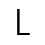
<style>
.page{position:relative;width:45px;height:45px;background:#ffffff}
.page>*{position:absolute;margin:0}
.t1{font:36px "CenturyGothic";color:#000000}
</style>
<div class="page">
<p class="t1" style="left:17px;top:9px;width:13px;height:26px">L</p>
</div>
